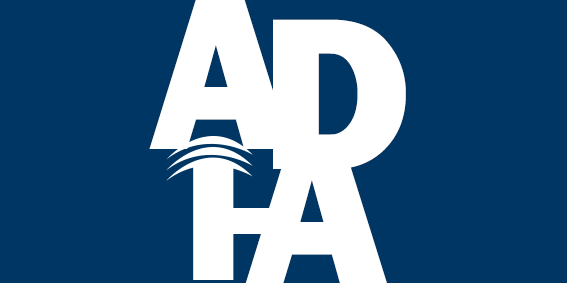
<style>
.page{position:relative;width:567px;height:283px;background:#003663}
.page>*{position:absolute;margin:0}
.t1{font:223.7px "FranklinGothic-Heavy";color:#ffffff}
.t2{font:175.8px "FranklinGothic-Heavy";color:#ffffff;scale:1.11 1}
</style>
<div class="page">
<p class="t1" style="left:149px;top:0px;width:143px;height:149px">A</p>
<p class="t1" style="left:273px;top:19px;width:133px;height:150px">D</p>
<p class="t1" style="left:245px;top:134px;width:143px;height:150px">A</p>
<p class="t2" style="left:193px;top:162px;width:41px;height:118px">I</p>
</div>
